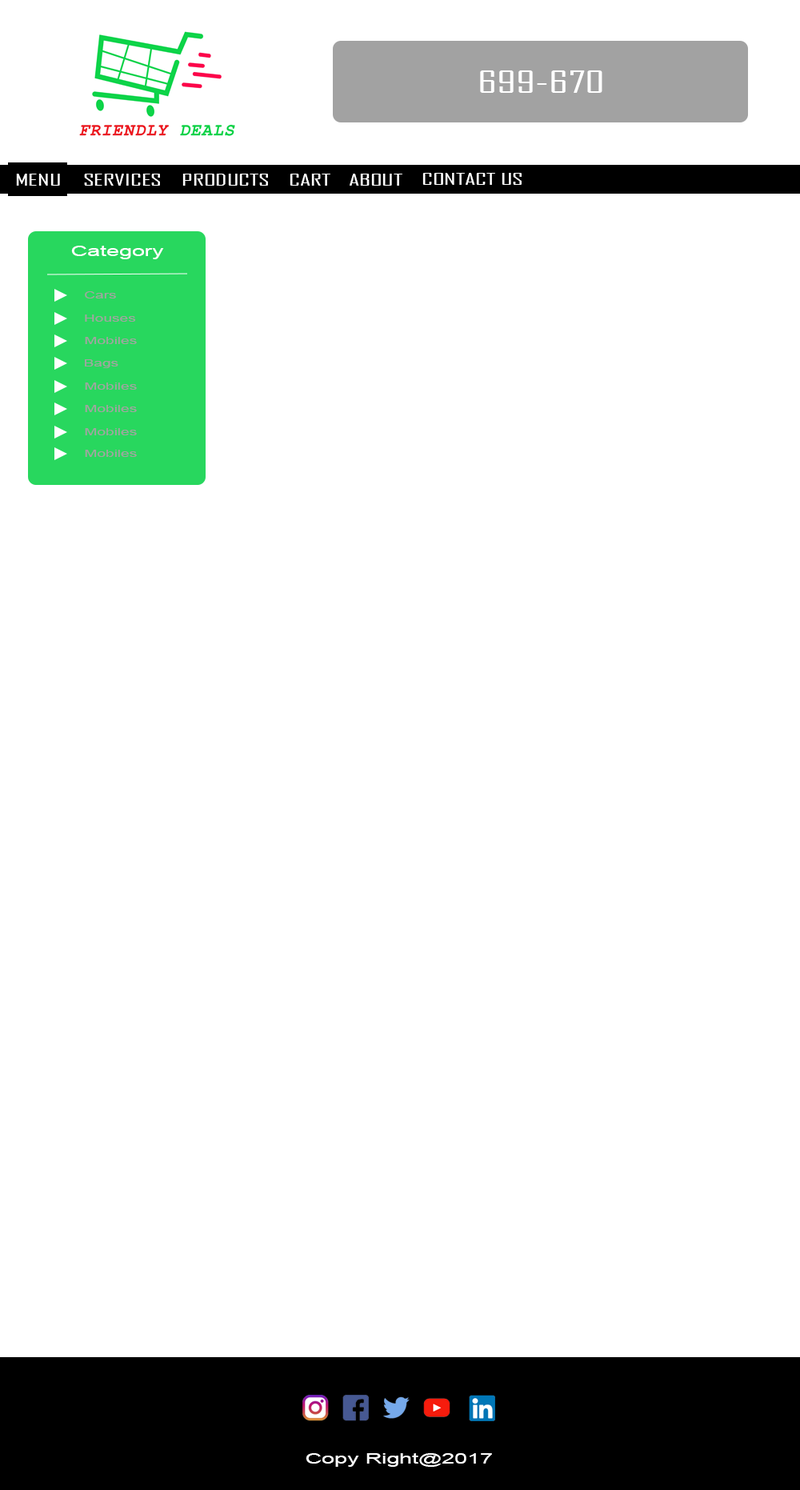
<style>
.page{position:relative;width:800px;height:1490px;background:#ffffff}
.page>*{position:absolute;margin:0}
.t1{font:28.8px "AgencyFB-Reg";color:#ffffff;scale:1.59 1}
.t2{font:16.3px "AgencyFB-Reg";color:#ffffff;scale:1.62 1}
.t3{font:14.4px "ArialMT";color:#ffffff;scale:1.59 1}
.t4{font:9.6px "ArialMT";color:#a2a2a2;scale:1.59 1}
</style>
<div class="page">
<p class="t1" style="left:480px;top:70px;width:123px;height:23px">699-670</p>
<p class="t2" style="left:16px;top:174px;width:44px;height:12px">MENU</p>
<p class="t2" style="left:84px;top:174px;width:76px;height:12px">SERVICES</p>
<p class="t2" style="left:182px;top:174px;width:86px;height:12px">PRODUCTS</p>
<p class="t2" style="left:290px;top:174px;width:41px;height:12px">CART</p>
<p class="t2" style="left:350px;top:174px;width:53px;height:12px">ABOUT</p>
<p class="t2" style="left:423px;top:173px;width:99px;height:12px">CONTACT US</p>
<p class="t3" style="left:71px;top:246px;width:93px;height:13px">Category</p>
<p class="t4" style="left:85px;top:291px;width:31px;height:7px">Cars</p>
<p class="t4" style="left:85px;top:314px;width:51px;height:8px">Houses</p>
<p class="t4" style="left:85px;top:337px;width:52px;height:7px">Mobiles</p>
<p class="t4" style="left:85px;top:359px;width:33px;height:9px">Bags</p>
<p class="t4" style="left:85px;top:383px;width:52px;height:7px">Mobiles</p>
<p class="t4" style="left:85px;top:405px;width:52px;height:7px">Mobiles</p>
<p class="t4" style="left:85px;top:428px;width:52px;height:7px">Mobiles</p>
<p class="t4" style="left:85px;top:450px;width:52px;height:7px">Mobiles</p>
<p class="t3" style="left:306px;top:1453px;width:186px;height:14px">Copy Right@2017</p>
</div>
